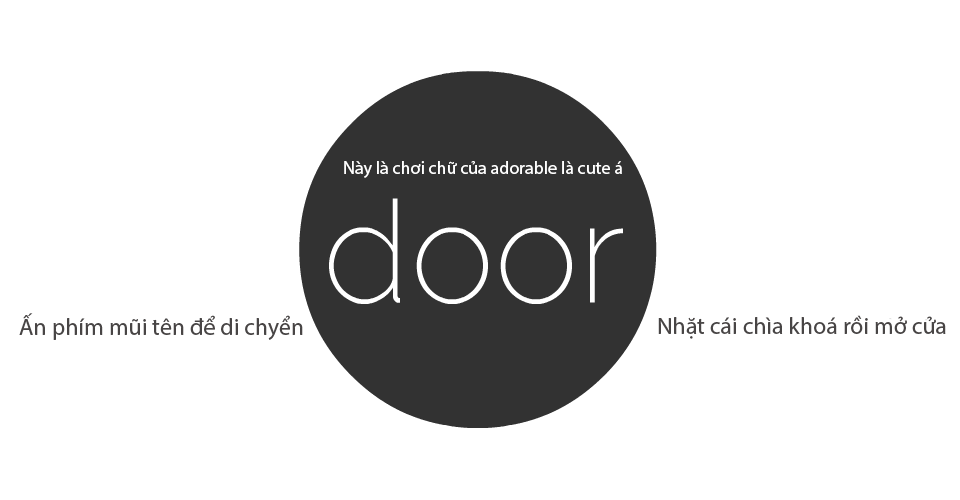
<style>
.page{position:relative;width:960px;height:500px;background:#ffffff}
.page>*{position:absolute;margin:0}
.t1{font:18px "MyriadPro-Regular";color:#ffffff}
.t2{font:23.7px "MyriadPro-Regular";color:#484545}
</style>
<div class="page">
<p class="t1" style="left:344px;top:161px;width:278px;height:17px">Này là chơi chữ của adorable là cute á</p>
<p class="t2" style="left:19px;top:313px;width:284px;height:27px">Ấn phím mũi tên để di chyển</p>
<p class="t2" style="left:658px;top:315px;width:288px;height:24px">Nhặt cái chìa khoá rồi mở cửa</p>
</div>
